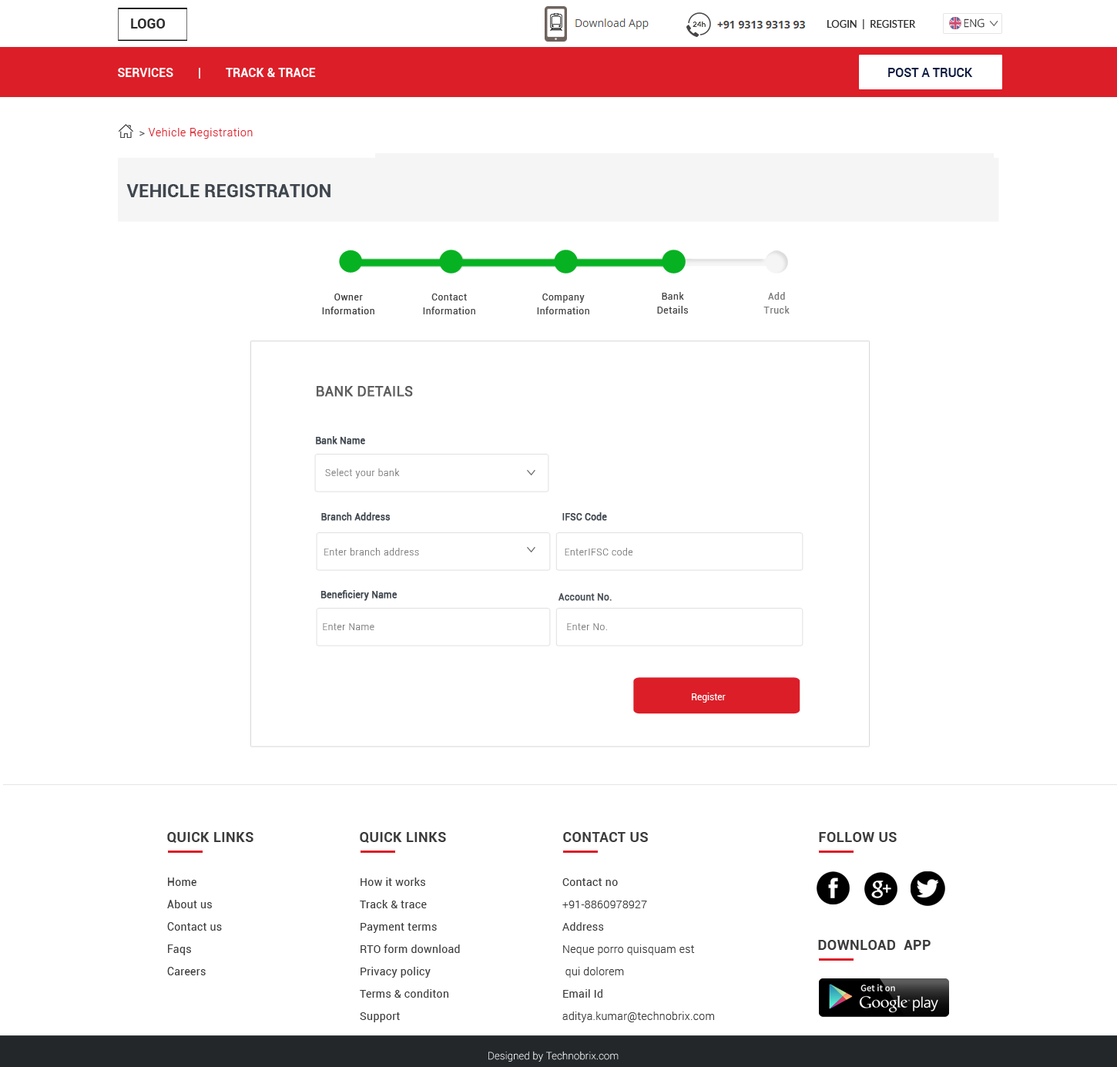
<style>
.page{position:relative;width:1117px;height:1067px;background:#ffffff}
.page>*{position:absolute;margin:0}
.t1{font:13.9px "Roboto-Bold";color:#2c2c2c}
.t2{font:10px "Lato-Regular";color:#2c2c2c;text-transform:uppercase}
.t3{font:10.8px "OpenSans-Light";color:#2c2c2c}
.t4{font:12.3px "Roboto-Bold";color:#ffffff;text-transform:uppercase}
.t5{font:12.3px "Roboto-Medium";color:#0d1a41}
.t6{font:10.8px "Roboto-Light";letter-spacing:0.05em;color:#dc1e28}
.t7{font:10.8px "Roboto-Light";letter-spacing:0.05em;color:#3f464e}
.t8{font:18.5px "Roboto-Bold";color:#3f464e;text-transform:uppercase}
.t9{font:9.2px/13.9px "Roboto-Regular";letter-spacing:0.05em;color:#3c3c3c}
.t10{font:9.2px/13.9px "Roboto-Regular";letter-spacing:0.05em;color:#444444}
.t11{font:9.2px/13.9px "Roboto-Regular";letter-spacing:0.05em;color:#777777}
.t12{font:13.9px "Roboto-Regular";color:#5c5c5c;font-weight:bold}
.t13{font:9.2px "Roboto-Regular";color:#3f464e;font-weight:bold}
.t14{font:9.2px "Roboto-Light";letter-spacing:0.05em;color:#777777}
.t15{font:9.2px "Roboto-Regular";color:#4c525a;font-weight:bold}
.t16{font:9.2px "Roboto-Regular";color:#ffffff}
.t17{font:13.9px "Roboto-Bold";letter-spacing:0.025em;color:#3c3c3c}
.t18{font:10.8px/22.3px "Roboto-Regular";letter-spacing:0.025em;color:#3c3c3c}
.t19{font:10.8px/22.3px "Roboto-Light";letter-spacing:0.025em;color:#3c3c3c}
.t20{font:10px "Roboto-Thin";letter-spacing:0.025em;color:#ffffff}
</style>
<div class="page">
<p class="t1" style="left:131px;top:18px;width:34px;height:11px">LOGO</p>
<p class="t2" style="left:828px;top:19px;width:88px;height:10px">Login  |  Register</p>
<p class="t3" style="left:964px;top:18px;width:21px;height:10px">ENG</p>
<p class="t4" style="left:118px;top:68px;width:198px;height:11px">Services        |        Track &amp; TraCe</p>
<p class="t5" style="left:888px;top:68px;width:85px;height:9px">POST A TRUCK</p>
<p class="t6" style="left:139px;top:128px;width:114px;height:11px"><span class="t7">&gt; </span>Vehicle Registration</p>
<p class="t8" style="left:126px;top:184px;width:205px;height:13px">Vehicle Registration</p>
<p class="t9" style="left:322px;top:294px;width:52px;height:20px;text-align:center">Owner<br>Information</p>
<p class="t10" style="left:423px;top:294px;width:52px;height:20px;text-align:center">Contact<br>Information</p>
<p class="t10" style="left:537px;top:294px;width:52px;height:20px;text-align:center">Company<br>Information</p>
<p class="t10" style="left:657px;top:292px;width:31px;height:22px;text-align:center">Bank<br>Details</p>
<p class="t11" style="left:764px;top:292px;width:26px;height:22px;text-align:center">Add<br>Truck</p>
<p class="t12" style="left:317px;top:386px;width:96px;height:11px">BANK DETAILS</p>
<p class="t13" style="left:316px;top:436px;width:49px;height:9px">Bank Name</p>
<p class="t14" style="left:325px;top:469px;width:75px;height:10px">Select your bank</p>
<p class="t13" style="left:321px;top:512px;width:70px;height:9px">Branch Address</p>
<p class="t13" style="left:563px;top:512px;width:44px;height:9px">IFSC Code</p>
<p class="t14" style="left:324px;top:548px;width:95px;height:8px">Enter branch address</p>
<p class="t14" style="left:565px;top:548px;width:68px;height:8px">EnterIFSC code</p>
<p class="t13" style="left:321px;top:590px;width:77px;height:11px">Beneficiery Name</p>
<p class="t15" style="left:559px;top:593px;width:53px;height:8px">Account No.</p>
<p class="t14" style="left:323px;top:623px;width:51px;height:7px">Enter Name</p>
<p class="t14" style="left:567px;top:623px;width:40px;height:7px">Enter No.</p>
<p class="t16" style="left:692px;top:693px;width:34px;height:10px">Register</p>
<p class="t17" style="left:167px;top:832px;width:87px;height:11px">QUICK LINKS</p>
<p class="t17" style="left:360px;top:832px;width:86px;height:11px">QUICK LINKS</p>
<p class="t17" style="left:563px;top:832px;width:85px;height:10px">CONTACT US</p>
<p class="t17" style="left:819px;top:832px;width:78px;height:10px">FOLLOW US</p>
<p class="t18" style="left:167px;top:878px;width:55px;height:98px">Home<br>About us <br>Contact us<br>Faqs<br>Careers</p>
<p class="t18" style="left:360px;top:878px;width:100px;height:145px">How it works<br>Track &amp; trace<br>Payment terms<br>RTO form download<br>Privacy policy <br>Terms &amp; conditon<br>Support</p>
<p class="t19" style="left:563px;top:878px;width:151px;height:145px"><span class="t18">Contact no<br></span>+91-8860978927<br><span class="t18">Address<br></span>Neque porro quisquam est<br> qui dolorem<br><span class="t18">Email Id<br></span>aditya.kumar@technobrix.com</p>
<p class="t17" style="left:818px;top:940px;width:113px;height:10px">DOWNLOAD  APP</p>
<p class="t20" style="left:489px;top:1051px;width:130px;height:11px">Designed by Technobrix.com</p>
</div>
